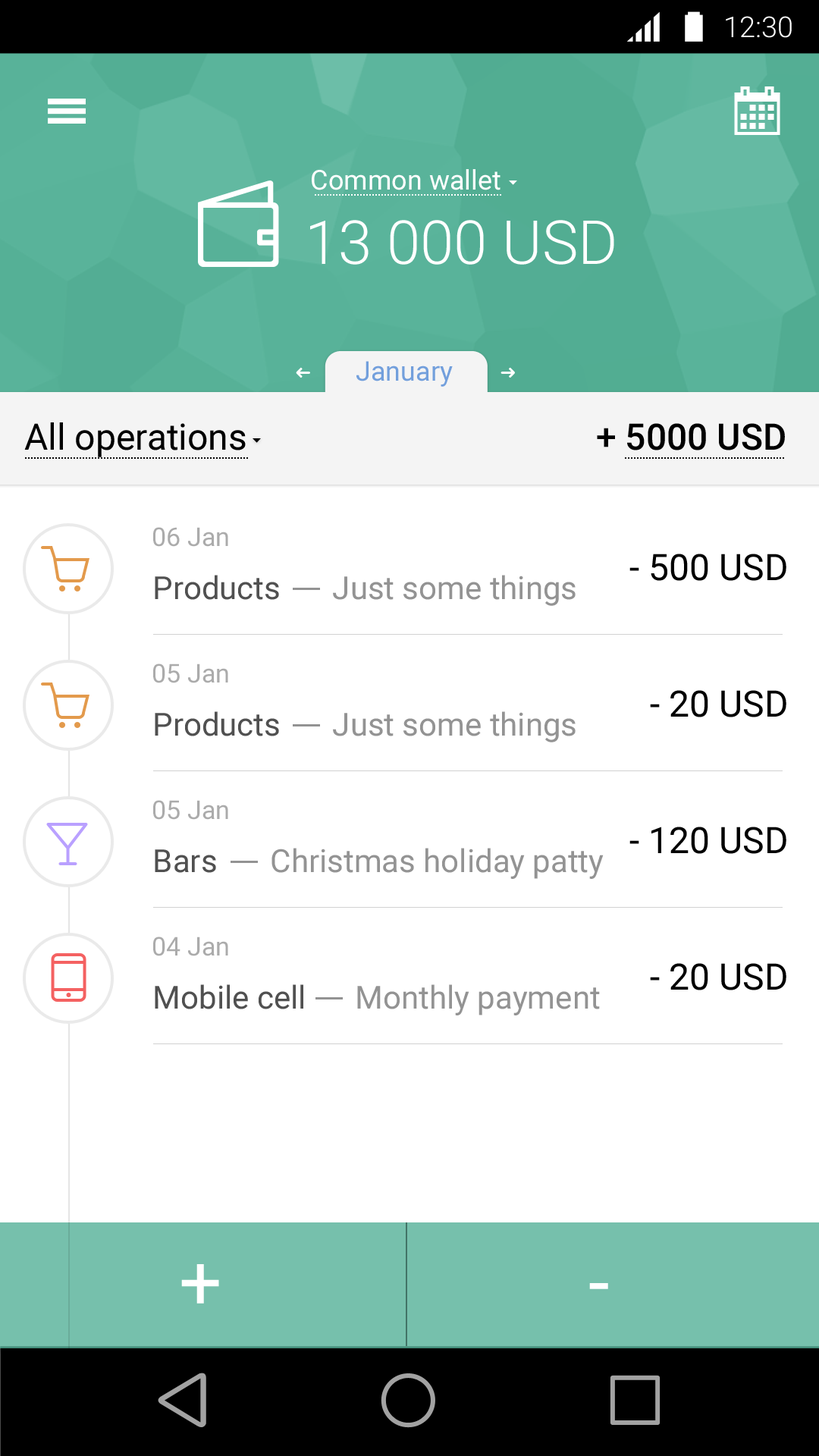
<style>
.page{position:relative;width:819px;height:1456px;background:#ffffff}
.page>*{position:absolute;margin:0}
.t1{font:28.8px "Roboto-Light";color:#ffffff}
.t2{font:27.3px "Roboto-Regular";color:#ffffff}
.t3{font:60.7px "Roboto-Light";color:#ffffff}
.t4{font:27.3px "Roboto-Regular";color:#729fdc}
.t5{font:36.4px "Roboto-Regular";color:#000000}
.t6{font:36.4px "Roboto-Medium";color:#000000}
.t7{font:25.8px "Roboto-Regular";color:#ababab}
.t8{font:31.8px "Roboto-Regular";color:#505050}
.t9{font:31.8px "Roboto-Regular";color:#939393}
.t10{font:75.8px "Roboto-Regular";color:#ffffff}
</style>
<div class="page">
<p class="t1" style="left:726px;top:16px;width:66px;height:22px">12:30</p>
<p class="t2" style="left:312px;top:169px;width:188px;height:21px">Common wallet</p>
<p class="t3" style="left:310px;top:220px;width:304px;height:45px">13 000 USD</p>
<p class="t4" style="left:356px;top:361px;width:97px;height:26px">January</p>
<p class="t5" style="left:24px;top:422px;width:222px;height:35px">All operations</p>
<p class="t6" style="left:597px;top:423px;width:188px;height:27px">+ 5000 USD</p>
<p class="t7" style="left:153px;top:527px;width:75px;height:20px">06 Jan</p>
<p class="t5" style="left:629px;top:554px;width:157px;height:27px">- 500 USD</p>
<p class="t8" style="left:155px;top:575px;width:124px;height:25px">Products</p>
<p class="t9" style="left:333px;top:575px;width:243px;height:31px">Just some things</p>
<p class="t7" style="left:153px;top:664px;width:75px;height:19px">05 Jan</p>
<p class="t5" style="left:650px;top:690px;width:136px;height:27px">- 20 USD</p>
<p class="t8" style="left:155px;top:711px;width:124px;height:25px">Products</p>
<p class="t9" style="left:333px;top:711px;width:243px;height:31px">Just some things</p>
<p class="t7" style="left:153px;top:800px;width:75px;height:20px">05 Jan</p>
<p class="t5" style="left:629px;top:827px;width:157px;height:27px">- 120 USD</p>
<p class="t8" style="left:155px;top:849px;width:61px;height:24px">Bars</p>
<p class="t9" style="left:271px;top:848px;width:333px;height:31px">Christmas holiday patty</p>
<p class="t7" style="left:153px;top:937px;width:75px;height:19px">04 Jan</p>
<p class="t5" style="left:650px;top:963px;width:136px;height:27px">- 20 USD</p>
<p class="t8" style="left:155px;top:984px;width:148px;height:25px">Mobile cell</p>
<p class="t9" style="left:357px;top:984px;width:243px;height:31px">Monthly payment</p>
<p class="t10" style="left:181px;top:1264px;width:38px;height:40px">+</p>
<p class="t10" style="left:589px;top:1283px;width:19px;height:6px">-</p>
</div>
